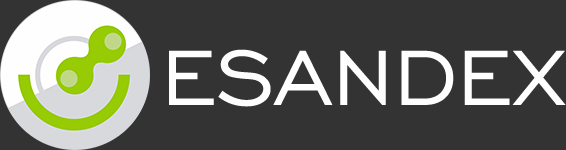
<style>
.page{position:relative;width:566px;height:150px;background:#333333}
.page>*{position:absolute;margin:0}
.t1{font:100px "EngraversGothicBT-Regular";color:#fefefe}
</style>
<div class="page">
<p class="t1" style="left:169px;top:49px;width:397px;height:58px">ESANDEX</p>
</div>
